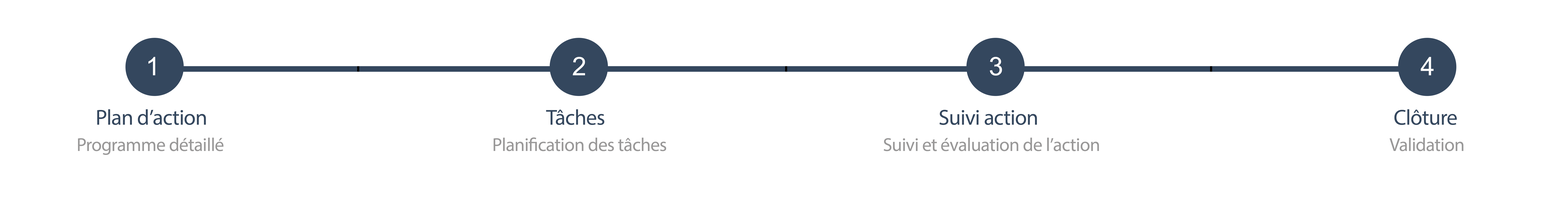
<style>
.page{position:relative;width:1568px;height:197px;background:#ffffff}
.page>*{position:absolute;margin:0}
.t1{font:25.7px "ArialMT";letter-spacing:-0.02em;color:#ffffff}
.t2{font:21.7px "MyriadPro-Regular";letter-spacing:-0.02em;color:#34475e}
.t3{font:18.8px "MyriadPro-Regular";letter-spacing:-0.02em;color:#999898}
</style>
<div class="page">
<p class="t1" style="left:148px;top:57px;width:7px;height:18px">1</p>
<p class="t1" style="left:573px;top:57px;width:12px;height:18px">2</p>
<p class="t1" style="left:990px;top:57px;width:12px;height:19px">3</p>
<p class="t1" style="left:1421px;top:57px;width:13px;height:18px">4</p>
<p class="t2" style="left:97px;top:109px;width:109px;height:16px">Plan d’action</p>
<p class="t2" style="left:546px;top:109px;width:58px;height:16px">Tâches</p>
<p class="t2" style="left:939px;top:110px;width:98px;height:15px">Suivi action</p>
<p class="t2" style="left:1394px;top:109px;width:63px;height:16px">Clôture</p>
<p class="t3" style="left:78px;top:138px;width:145px;height:17px">Programme détaillé</p>
<p class="t3" style="left:493px;top:138px;width:173px;height:14px">Planification des tâches</p>
<p class="t3" style="left:884px;top:138px;width:215px;height:14px">Suivi et évaluation de l’action</p>
<p class="t3" style="left:1390px;top:138px;width:73px;height:14px">Validation</p>
</div>
